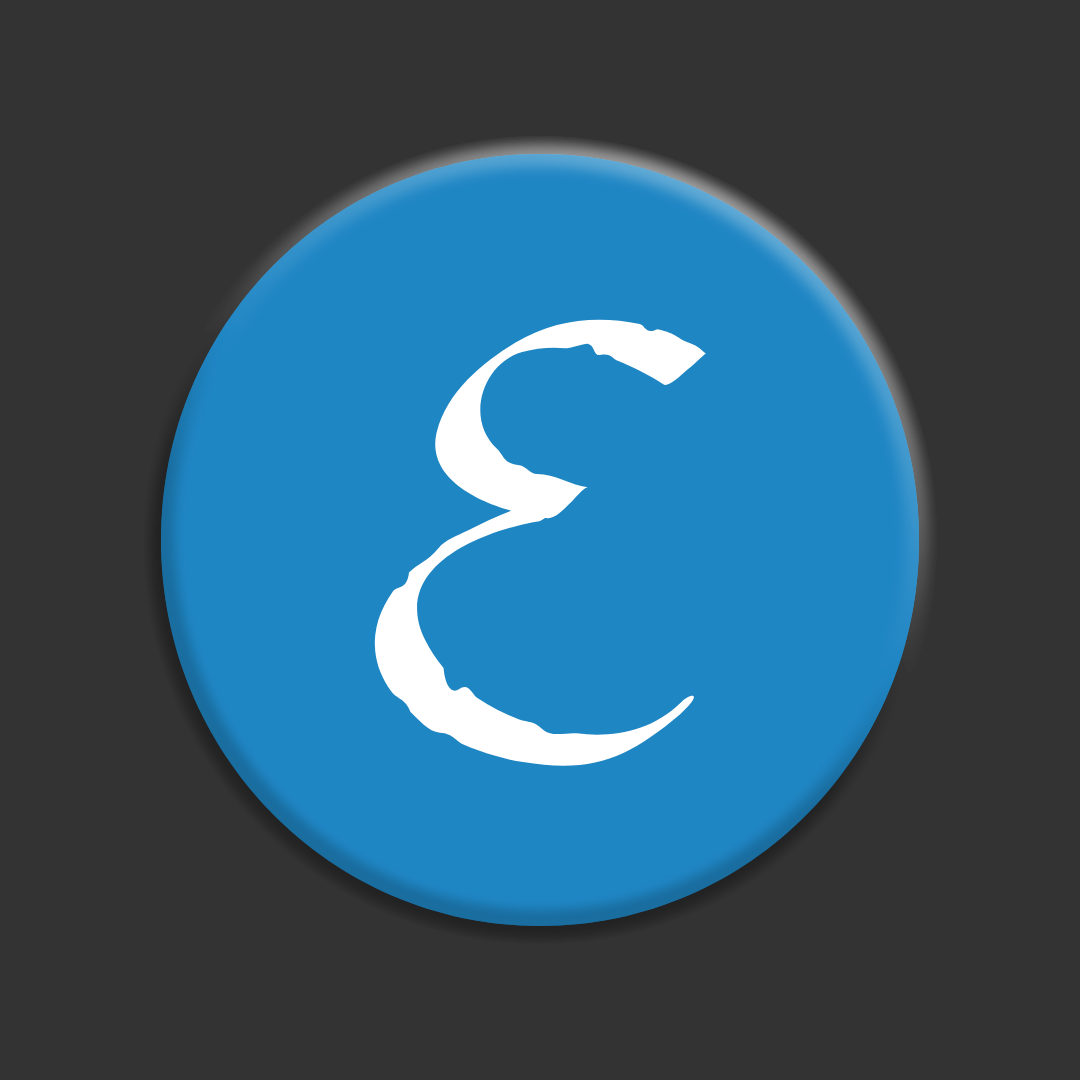
<style>
.page{position:relative;width:1080px;height:1080px;background:#333333}
.page>*{position:absolute;margin:0}
.t1{font:734.9px "GothicUltraOT";color:#ffffff}
</style>
<div class="page">
<p class="t1" style="left:374px;top:319px;width:332px;height:447px">E</p>
</div>
